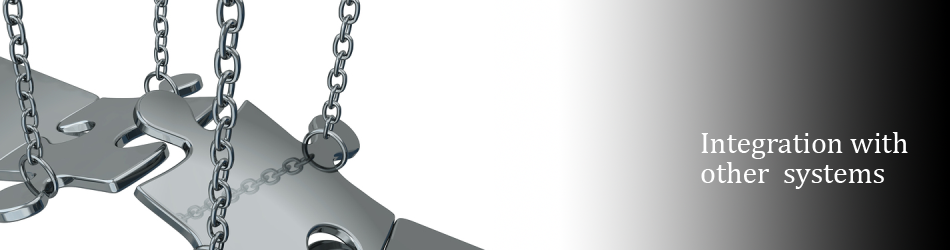
<style>
.page{position:relative;width:950px;height:250px;background:#ffffff}
.page>*{position:absolute;margin:0}
.t1{font:30px/30px "Cambria";color:#ffffff}
</style>
<div class="page">
<p class="t1" style="left:701px;top:132px;width:207px;height:57px">Integration with <br>other  systems</p>
</div>
